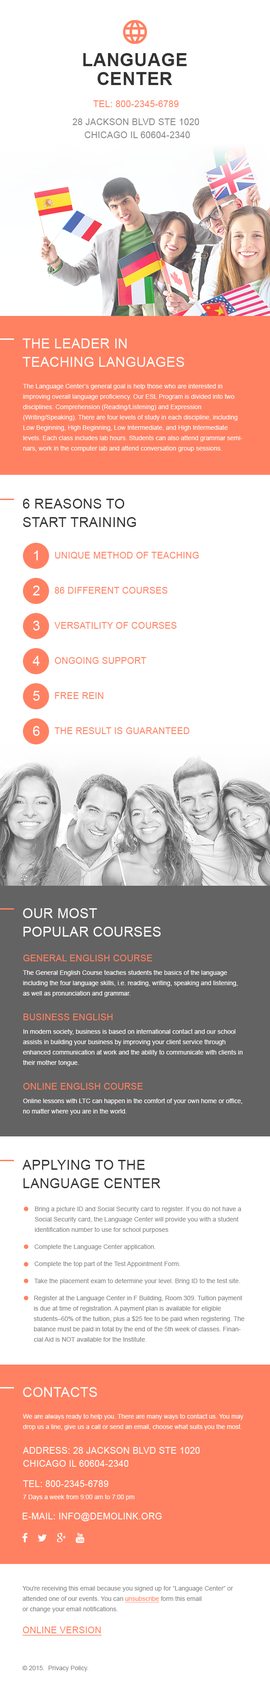
<style>
.page{position:relative;width:270px;height:1690px;background:#ffffff}
.page>*{position:absolute;margin:0}
.t1{font:18px/18.9px "Arial-BoldMT";letter-spacing:0.02em;color:#333333;text-transform:uppercase}
.t2{font:9px "ArialMT";letter-spacing:0.02em;color:#ff8161;text-transform:uppercase}
.t3{font:9px/13.1px "ArialMT";letter-spacing:0.02em;color:#888888;text-transform:uppercase}
.t4{font:13.5px/18.4px "ArialMT";letter-spacing:0.02em;color:#fdfdfd;text-transform:uppercase}
.t5{font:6.3px/10.3px "ArialMT";color:#fdfdfd}
.t6{font:13.5px/18.4px "ArialMT";letter-spacing:0.02em;color:#333333;text-transform:uppercase}
.t7{font:13.5px "ArialMT";letter-spacing:0.02em;color:#ffffff;text-transform:uppercase}
.t8{font:6.3px/10.3px "ArialMT";color:#888888}
.t9{font:6.3px "ArialMT";color:#888888}
.t10{font:13.5px "ArialMT";letter-spacing:0.02em;color:#fdfdfd;text-transform:uppercase}
.t11{font:9px/13.1px "ArialMT";letter-spacing:0.02em;color:#ffffff;text-transform:uppercase}
.t12{font:9px "ArialMT";letter-spacing:0.02em;color:#ffffff;text-transform:uppercase}
.t13{font:6.3px "ArialMT";color:#fdfdfd}
.t14{font:6.3px/10.3px "ArialMT";color:#ff8161;text-decoration:underline}
.t15{font:9px "ArialMT";letter-spacing:0.02em;color:#ff8161;text-transform:uppercase;text-decoration:underline}
</style>
<div class="page">
<p class="t1" style="left:83px;top:53px;width:104px;height:32px;text-align:center">Language<br>Center</p>
<p class="t2" style="left:93px;top:100px;width:86px;height:7px">Tel: 800-2345-6789</p>
<p class="t3" style="left:72px;top:118px;width:127px;height:20px;text-align:center">28 Jackson Blvd Ste 1020 <br>Chicago IL 60604-2340</p>
<p class="t4" style="left:22px;top:338px;width:162px;height:29px">The leader in <br>teaching languages</p>
<p class="t5" style="left:23px;top:383px;width:220px;height:69px">The Language Center’s general goal is help those who are interested in improving overall language proficiency. Our ESL Program is divided into two disciplines: Comprehension (Reading/Listening) and Expression (Writing/Speaking). There are four levels of study in each discipline, including Low Beginning, High Beginning, Low Intermediate, and High Intermediate levels. Each class includes lab hours. Students can also attend grammar seminars, work in the computer lab and attend conversation group sessions.</p>
<p class="t6" style="left:23px;top:499px;width:113px;height:28px">6 reasons to <br>start training</p>
<p class="t7" style="left:34px;top:550px;width:4px;height:10px">1</p>
<p class="t2" style="left:55px;top:552px;width:144px;height:7px">Unique method of teaching</p>
<p class="t7" style="left:33px;top:585px;width:7px;height:10px">2</p>
<p class="t2" style="left:54px;top:587px;width:113px;height:7px">86 different courses</p>
<p class="t7" style="left:33px;top:621px;width:7px;height:9px">3</p>
<p class="t2" style="left:54px;top:622px;width:123px;height:7px">Versatility of courses</p>
<p class="t7" style="left:32px;top:656px;width:8px;height:10px">4</p>
<p class="t2" style="left:54px;top:657px;width:92px;height:7px">Ongoing support</p>
<p class="t7" style="left:33px;top:691px;width:7px;height:10px">5</p>
<p class="t2" style="left:55px;top:692px;width:49px;height:7px">Free rein</p>
<p class="t7" style="left:33px;top:726px;width:7px;height:10px">6</p>
<p class="t2" style="left:54px;top:727px;width:135px;height:7px">The result is guaranteed</p>
<p class="t4" style="left:23px;top:908px;width:138px;height:28px">Our most <br>popular courses</p>
<p class="t2" style="left:23px;top:954px;width:129px;height:7px">General English Course</p>
<p class="t5" style="left:23px;top:970px;width:215px;height:27px">The General English Course teaches students the basics of the language including the four language skills, i.e. reading, writing, speaking and listening, as well as pronunciation and grammar.</p>
<p class="t2" style="left:23px;top:1013px;width:89px;height:7px">Business English</p>
<p class="t5" style="left:23px;top:1029px;width:220px;height:37px">In modern society, business is based on international contact and our school assists in building your business by improving your client service through enhanced communication at work and the ability to communicate with clients in their mother tongue.</p>
<p class="t2" style="left:23px;top:1083px;width:120px;height:6px">Online English Course</p>
<p class="t5" style="left:23px;top:1098px;width:219px;height:17px">Online lessons with LTC can happen in the comfort of your own home or office, no matter where you are in the world.</p>
<p class="t6" style="left:22px;top:1160px;width:139px;height:28px">Applying to the <br>Language Center</p>
<p class="t8" style="left:35px;top:1206px;width:206px;height:27px">Bring a picture ID and Social Security card to register. If you do not have a Social Security card, the Language Center will provide you with a student identification number to use for school purposes</p>
<p class="t9" style="left:34px;top:1244px;width:122px;height:6px">Complete the Language Center application.</p>
<p class="t9" style="left:34px;top:1261px;width:146px;height:6px">Complete the top part of the Test Appointment Form.</p>
<p class="t9" style="left:34px;top:1278px;width:206px;height:6px">Take the placement exam to determine your level. Bring ID to the test site.</p>
<p class="t8" style="left:34px;top:1295px;width:210px;height:46px">Register at the Language Center in F Building, Room 309. Tuition payment is due at time of registration. A payment plan is available for eligible students–60% of the tuition, plus a $25 fee to be paid when registering. The balance must be paid in total by the end of the 5th week of classes. Financial Aid is NOT available for the Institute.</p>
<p class="t10" style="left:23px;top:1387px;width:74px;height:10px">Contacts</p>
<p class="t5" style="left:23px;top:1413px;width:220px;height:17px">We are always ready to help you. There are many ways to contact us. You may drop us a line, give us a call or send an email, choose what suits you the most.</p>
<p class="t11" style="left:23px;top:1447px;width:177px;height:20px">Address: 28 Jackson Blvd Ste 1020 <br>Chicago IL 60604-2340</p>
<p class="t12" style="left:23px;top:1480px;width:85px;height:7px">Tel: 800-2345-6789</p>
<p class="t13" style="left:23px;top:1494px;width:112px;height:6px">7 Days a week from 9:00 am to 7:00 pm</p>
<p class="t12" style="left:22px;top:1512px;width:140px;height:9px">E-mail: info@demolink.org</p>
<p class="t8" style="left:22px;top:1585px;width:211px;height:27px">You're receiving this email because you signed up for “Language Center” or attended one of our events. You can <span class="t14">unsubscribe</span> form this email <br>or change your email notifications.</p>
<p class="t15" style="left:22px;top:1626px;width:80px;height:9px">online Version</p>
<p class="t9" style="left:22px;top:1665px;width:66px;height:6px">© 2015.  Privacy Policy.</p>
</div>
